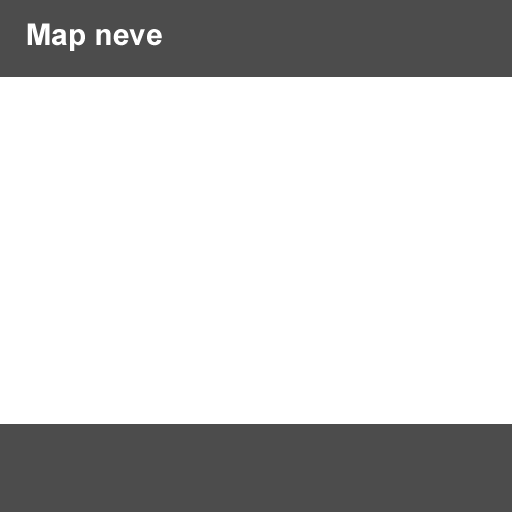
<style>
.page{position:relative;width:512px;height:512px;background:#ffffff}
.page>*{position:absolute;margin:0}
.t1{font:30px "Arial-BoldMT";color:#ffffff}
</style>
<div class="page">
<p class="t1" style="left:27px;top:23px;width:135px;height:28px">Map neve</p>
</div>
